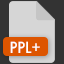
<style>
.page{position:relative;width:64px;height:64px;background:#333333}
.page>*{position:absolute;margin:0}
.t1{font:14.9px "Futura-Medium";color:#ffffff;scale:0.96 1}
</style>
<div class="page">
<p class="t1" style="left:10px;top:41px;width:30px;height:12px">PPL+</p>
</div>
